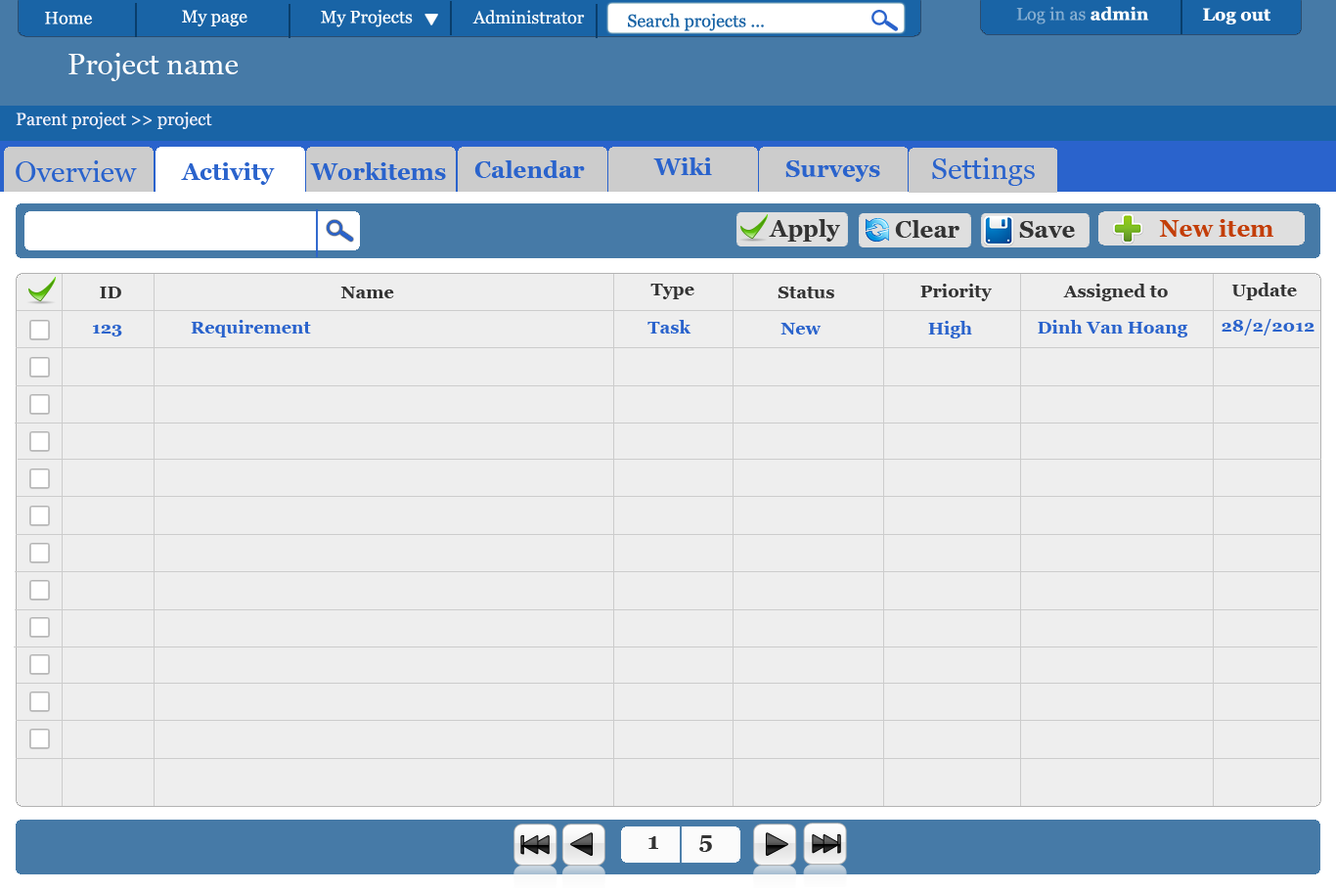
<style>
.page{position:relative;width:1336px;height:892px;background:#eeeeee}
.page>*{position:absolute;margin:0}
.t1{font:17.6px "Vani";color:#85add0}
.t2{font:17.6px "Vani-Bold";color:#ffffff}
.t3{font:17.6px "Vani";color:#ffffff}
.t4{font:17.6px "Vani";color:#f9fbfd}
.t5{font:17.6px "Vani";color:#1964a6}
.t6{font:29.4px "Vani";color:#ffffff}
.t7{font:17.6px "Vani";color:#f1f0fa}
.t8{font:29.4px "Vani";color:#2a63cc}
.t9{font:23.5px "Vani-Bold";color:#2a63cc}
.t10{font:23.5px "Vani-Bold";color:#333333}
.t11{font:23.5px "Vani-Bold";color:#c33e09}
.t12{font:17.6px "Vani-Bold";color:#333333}
.t13{font:17.6px "Vani-Bold";color:#2a63cc}
</style>
<div class="page">
<p class="t1" style="left:1017px;top:6px;width:133px;height:18px">Log in as <span class="t2">admin</span></p>
<p class="t3" style="left:45px;top:12px;width:47px;height:12px">Home</p>
<p class="t3" style="left:182px;top:10px;width:66px;height:16px">My page</p>
<p class="t3" style="left:321px;top:10px;width:92px;height:17px">My Projects</p>
<p class="t4" style="left:473px;top:10px;width:112px;height:14px">Administrator</p>
<p class="t5" style="left:628px;top:13px;width:136px;height:18px">Search projects ...</p>
<p class="t2" style="left:1203px;top:8px;width:68px;height:16px">Log out</p>
<p class="t6" style="left:68px;top:53px;width:171px;height:28px">Project name</p>
<p class="t7" style="left:16px;top:112px;width:196px;height:17px">Parent project &gt;&gt; project</p>
<p class="t8" style="left:16px;top:160px;width:121px;height:22px">Overview</p>
<p class="t9" style="left:474px;top:160px;width:111px;height:18px">Calendar</p>
<p class="t9" style="left:654px;top:158px;width:58px;height:17px">Wiki</p>
<p class="t9" style="left:786px;top:160px;width:95px;height:22px">Surveys</p>
<p class="t8" style="left:932px;top:158px;width:103px;height:28px">Settings</p>
<p class="t9" style="left:181px;top:162px;width:94px;height:23px">Activity</p>
<p class="t9" style="left:310px;top:162px;width:136px;height:18px">Workitems</p>
<p class="t10" style="left:769px;top:219px;width:71px;height:23px">Apply</p>
<p class="t10" style="left:895px;top:220px;width:65px;height:18px">Clear</p>
<p class="t10" style="left:1019px;top:221px;width:56px;height:17px">Save</p>
<p class="t11" style="left:1159px;top:219px;width:115px;height:18px">New item</p>
<p class="t12" style="left:100px;top:287px;width:21px;height:11px">ID</p>
<p class="t12" style="left:340px;top:287px;width:54px;height:11px">Name</p>
<p class="t12" style="left:651px;top:284px;width:44px;height:15px">Type</p>
<p class="t12" style="left:778px;top:287px;width:57px;height:11px">Status</p>
<p class="t12" style="left:921px;top:284px;width:71px;height:17px">Priority</p>
<p class="t12" style="left:1063px;top:284px;width:105px;height:17px">Assigned to</p>
<p class="t12" style="left:1232px;top:283px;width:65px;height:17px">Update</p>
<p class="t13" style="left:93px;top:325px;width:29px;height:12px">123</p>
<p class="t13" style="left:191px;top:320px;width:120px;height:18px">Requirement</p>
<p class="t13" style="left:648px;top:320px;width:44px;height:14px">Task</p>
<p class="t13" style="left:781px;top:323px;width:41px;height:12px">New</p>
<p class="t13" style="left:928px;top:321px;width:44px;height:18px">High</p>
<p class="t13" style="left:1038px;top:320px;width:151px;height:18px">Dinh Van Hoang</p>
<p class="t13" style="left:1222px;top:319px;width:93px;height:17px">28/2/2012</p>
<p class="t10" style="left:649px;top:836px;width:9px;height:13px">1</p>
<p class="t10" style="left:700px;top:836px;width:12px;height:16px">5</p>
</div>
